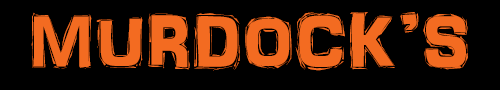
<style>
.page{position:relative;width:500px;height:90px;background:#000000}
.page>*{position:absolute;margin:0}
.t1{font:78px "ARDARLING";color:#f36b21;scale:0.91 1}
</style>
<div class="page">
<p class="t1" style="left:31px;top:12px;width:437px;height:59px">MURDOCK’S</p>
</div>
